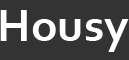
<style>
.page{position:relative;width:129px;height:60px;background:#333333}
.page>*{position:absolute;margin:0}
.t1{font:48px "Corbel-Bold";color:#fffefe}
</style>
<div class="page">
<p class="t1" style="left:0px;top:10px;width:129px;height:42px">Housy</p>
</div>
